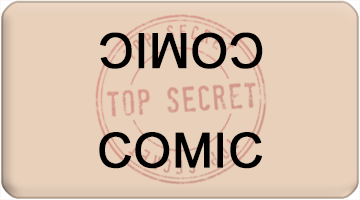
<style>
.page{position:relative;width:360px;height:200px;background:#e8d0bb}
.page>*{position:absolute;margin:0}
.t1{font:48px "ArialMT";color:#000000;font-weight:bold}
</style>
<div class="page">
<p class="t1" style="left:100px;top:32px;width:163px;height:37px;rotate:180deg">COMIC</p>
<p class="t1" style="left:99px;top:132px;width:163px;height:37px">COMIC</p>
</div>
